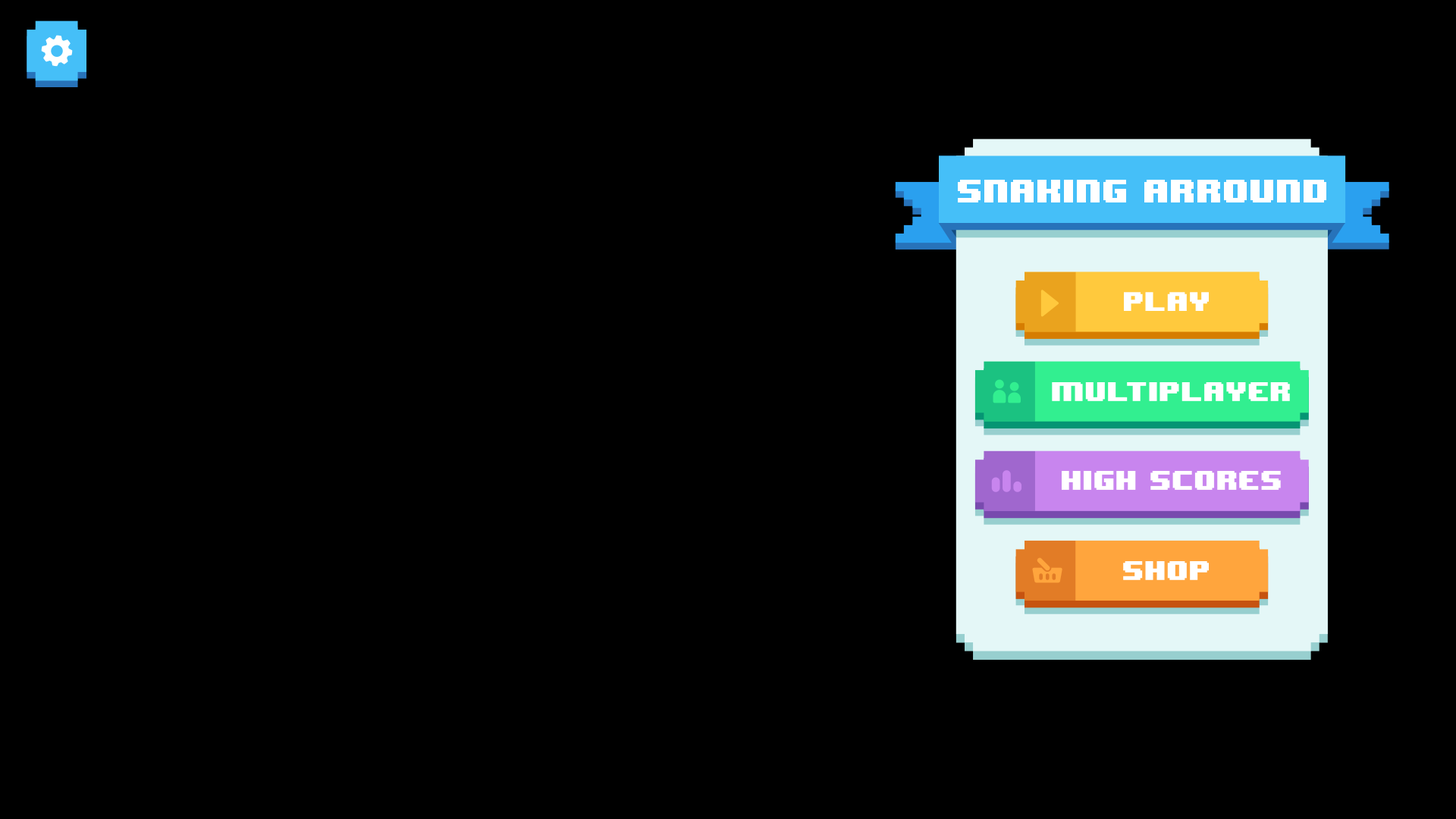
<style>
.page{position:relative;width:1456px;height:819px;background:#000000}
.page>*{position:absolute;margin:0}
.t1{font:27.3px "8BITWONDERNominal";color:#ffffff}
.t2{font:22.8px "8BITWONDERNominal";color:#ffffff}
</style>
<div class="page">
<p class="t1" style="left:958px;top:180px;width:368px;height:22px">SNAKING ARROUND</p>
<p class="t2" style="left:1124px;top:292px;width:85px;height:19px">play</p>
<p class="t2" style="left:1052px;top:382px;width:238px;height:19px">multiplayer</p>
<p class="t2" style="left:1062px;top:471px;width:219px;height:19px">high scores</p>
<p class="t2" style="left:1123px;top:561px;width:86px;height:19px">shop</p>
</div>
